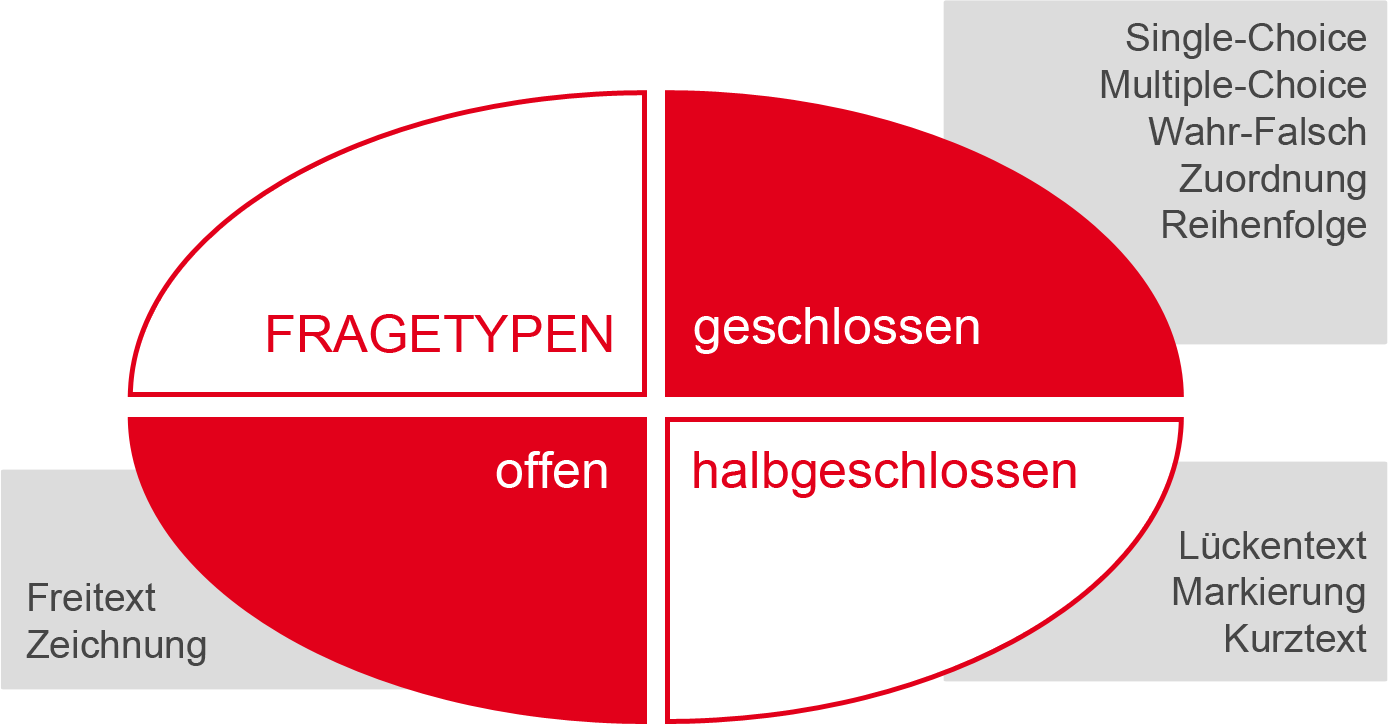
<style>
.page{position:relative;width:1388px;height:724px;background:#ffffff}
.page>*{position:absolute;margin:0}
.t1{font:39px "ArialMT";color:#464646}
.t2{font:52px "ArialMT";color:#e2001a}
.t3{font:52px "ArialMT";color:#ffffff}
</style>
<div class="page">
<p class="t1" style="left:1101px;top:23px;width:265px;height:223px;text-align:right">Single-Choice<br>Multiple-Choice<br>Wahr-Falsch<br>Zuordnung<br>Reihenfolge</p>
<p class="t2" style="left:268px;top:314px;width:344px;height:39px">FRAGETYPEN</p>
<p class="t3" style="left:694px;top:307px;width:285px;height:47px">geschlossen</p>
<p class="t3" style="left:496px;top:451px;width:111px;height:37px">offen</p>
<p class="t2" style="left:694px;top:451px;width:382px;height:47px">halbgeschlossen</p>
<p class="t1" style="left:1173px;top:531px;width:194px;height:121px;text-align:right">Lückentext<br>Markierung<br>Kurztext</p>
<p class="t1" style="left:26px;top:583px;width:180px;height:83px">Freitext<br>Zeichnung</p>
</div>
